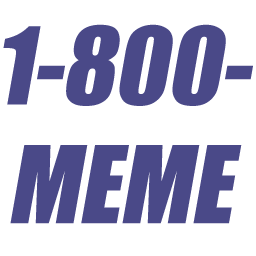
<style>
.page{position:relative;width:256px;height:256px;background:#ffffff}
.page>*{position:absolute;margin:0}
.t1{font:98.9px "Impact";color:#4a4988;font-style:italic}
</style>
<div class="page">
<p class="t1" style="left:3px;top:24px;width:250px;height:82px">1-800-</p>
<p class="t1" style="left:10px;top:145px;width:232px;height:79px">MEME</p>
</div>
